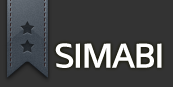
<style>
.page{position:relative;width:173px;height:87px;background:#333333}
.page>*{position:absolute;margin:0}
.t1{font:34.7px "Mentone-SemiBold";letter-spacing:-0.05em;color:#ffffff}
</style>
<div class="page">
<p class="t1" style="left:55px;top:43px;width:107px;height:25px">SIMABI</p>
</div>
